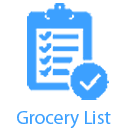
<style>
.page{position:relative;width:128px;height:128px;background:#ffffff}
.page>*{position:absolute;margin:0}
.t1{font:19.2px "MyriadPro-Regular";color:#3ca0ff}
</style>
<div class="page">
<p class="t1" style="left:17px;top:111px;width:94px;height:18px">Grocery List</p>
</div>
